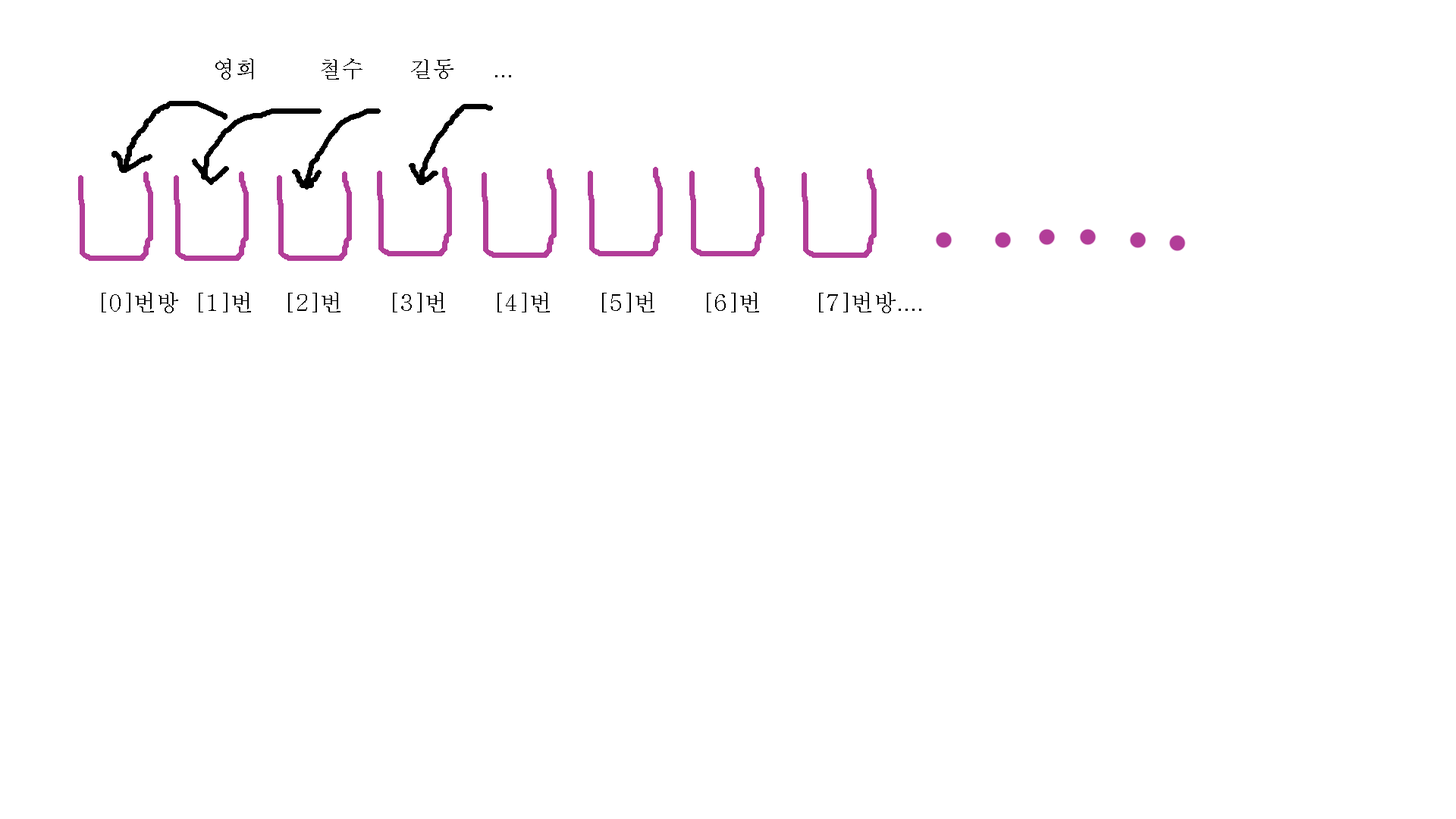
<style>
.page{position:relative;width:1456px;height:819px;background:#ffffff}
.page>*{position:absolute;margin:0}
.t1{font:22.7px "Batang";color:#000000}
</style>
<div class="page">
<p class="t1" style="left:215px;top:58px;width:296px;height:22px">영희        철수      길동     ...</p>
<p class="t1" style="left:102px;top:292px;width:819px;height:21px">[0]번방  [1]번    [2]번      [3]번      [4]번      [5]번      [6]번       [7]번방....</p>
</div>
